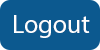
<style>
.page{position:relative;width:100px;height:50px;background:#0c598f}
.page>*{position:absolute;margin:0}
.t1{font:26px "MyriadPro-Regular";color:#ffffff}
</style>
<div class="page">
<p class="t1" style="left:14px;top:15px;width:76px;height:23px">Logout</p>
</div>
